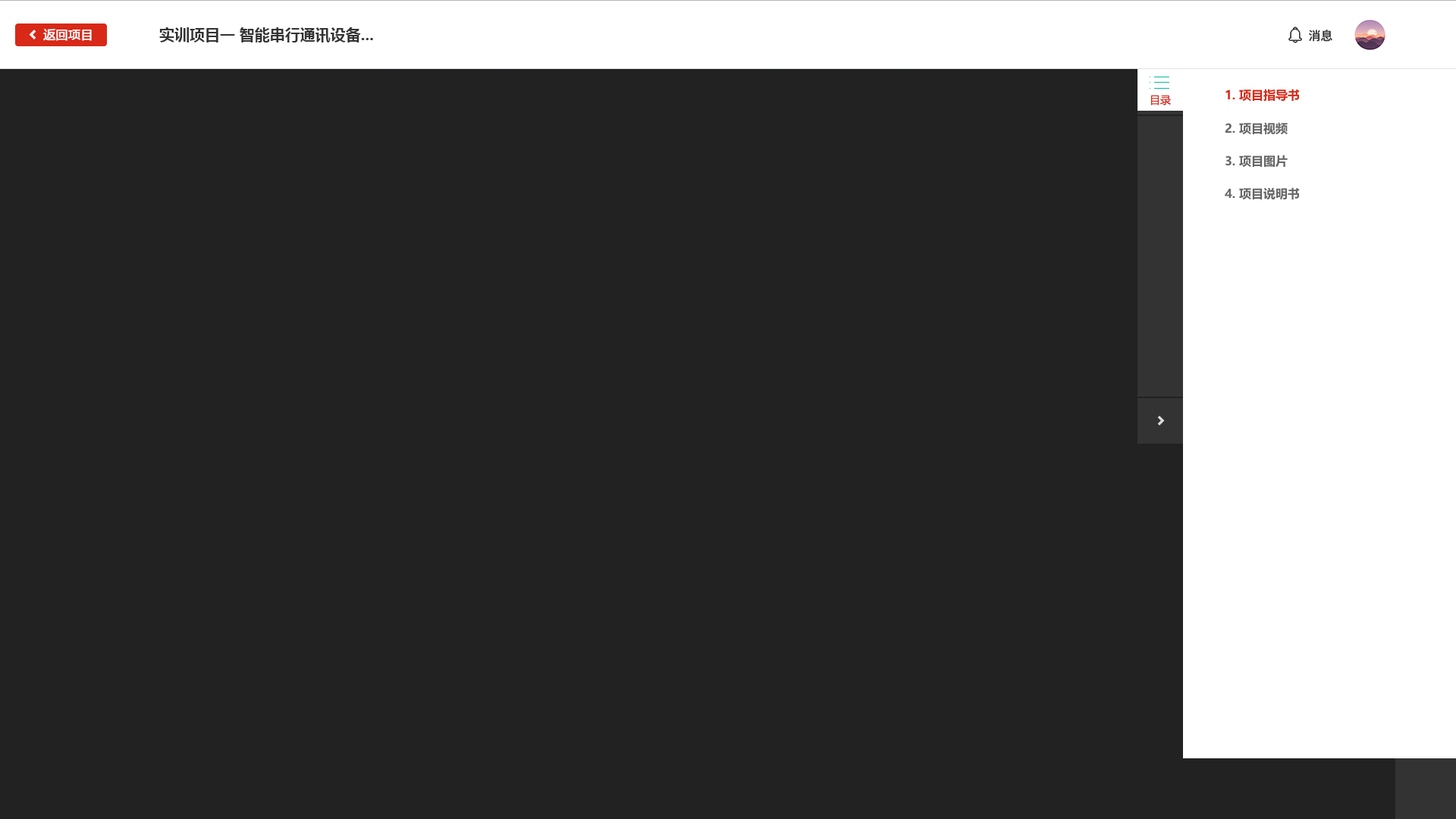
<style>
.page{position:relative;width:1456px;height:819px;background:#222222}
.page>*{position:absolute;margin:0}
.t1{font:12.1px "MicrosoftYaHei";color:#ffffff;font-weight:bold}
.t2{font:15.2px "MicrosoftYaHei-Bold";color:#333333}
.t3{font:12.1px "SourceHanSansCN-Medium";color:#333333}
.t4{font:12.1px "MicrosoftYaHeiUI-Bold";color:#d82918}
.t5{font:12.1px "MicrosoftYaHeiUI-Bold";color:#666666}
</style>
<div class="page">
<p class="t1" style="left:43px;top:29px;width:49px;height:12px">返回项目</p>
<p class="t2" style="left:159px;top:27px;width:214px;height:16px">实训项目一 智能串行通讯设备...</p>
<p class="t3" style="left:1309px;top:30px;width:23px;height:12px">消息</p>
<p class="t4" style="left:1225px;top:89px;width:75px;height:13px">1. 项目指导书</p>
<p class="t5" style="left:1225px;top:122px;width:63px;height:13px">2. 项目视频</p>
<p class="t5" style="left:1225px;top:155px;width:63px;height:13px">3. 项目图片</p>
<p class="t5" style="left:1225px;top:187px;width:75px;height:13px">4. 项目说明书</p>
</div>
